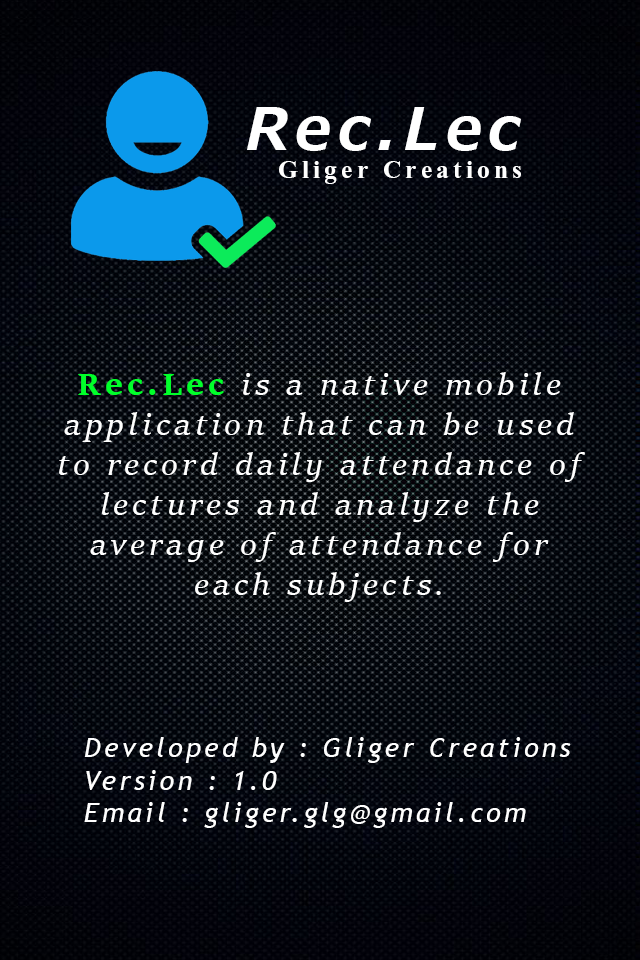
<style>
.page{position:relative;width:640px;height:960px}
.page>*{position:absolute;margin:0}
.t1{font:58.3px "Meiryo-BoldItalic";letter-spacing:0.12em;color:#ffffff}
.t2{font:33.3px "Kokila-Bold";letter-spacing:0.12em;color:#ffffff}
.t3{font:33.3px "SitkaSubheading-Italic";letter-spacing:0.12em;color:#ffffff}
.t4{font:33.3px "SitkaText-Bold";letter-spacing:0.12em;color:#00ff2a}
.t5{font:27.1px "TrebuchetMS-Italic";letter-spacing:0.12em;color:#ffffff}
</style>
<div class="page">
<p class="t1" style="left:247px;top:107px;width:274px;height:44px">Rec.Lec</p>
<p class="t2" style="left:279px;top:161px;width:242px;height:23px">Gliger Creations</p>
<p class="t3" style="left:59px;top:372px;width:526px;height:456px;text-align:center"><span class="t4">Rec.Lec</span> is a native mobile application that can be used to record daily attendance of lectures and analyze the    average of attendance for each subjects.<br><br><br><br><br><span class="t5">   Developed by : Gliger Creations<br>   Version : 1.0<br>   Email : gliger.glg@gmail.com</span></p>
</div>
